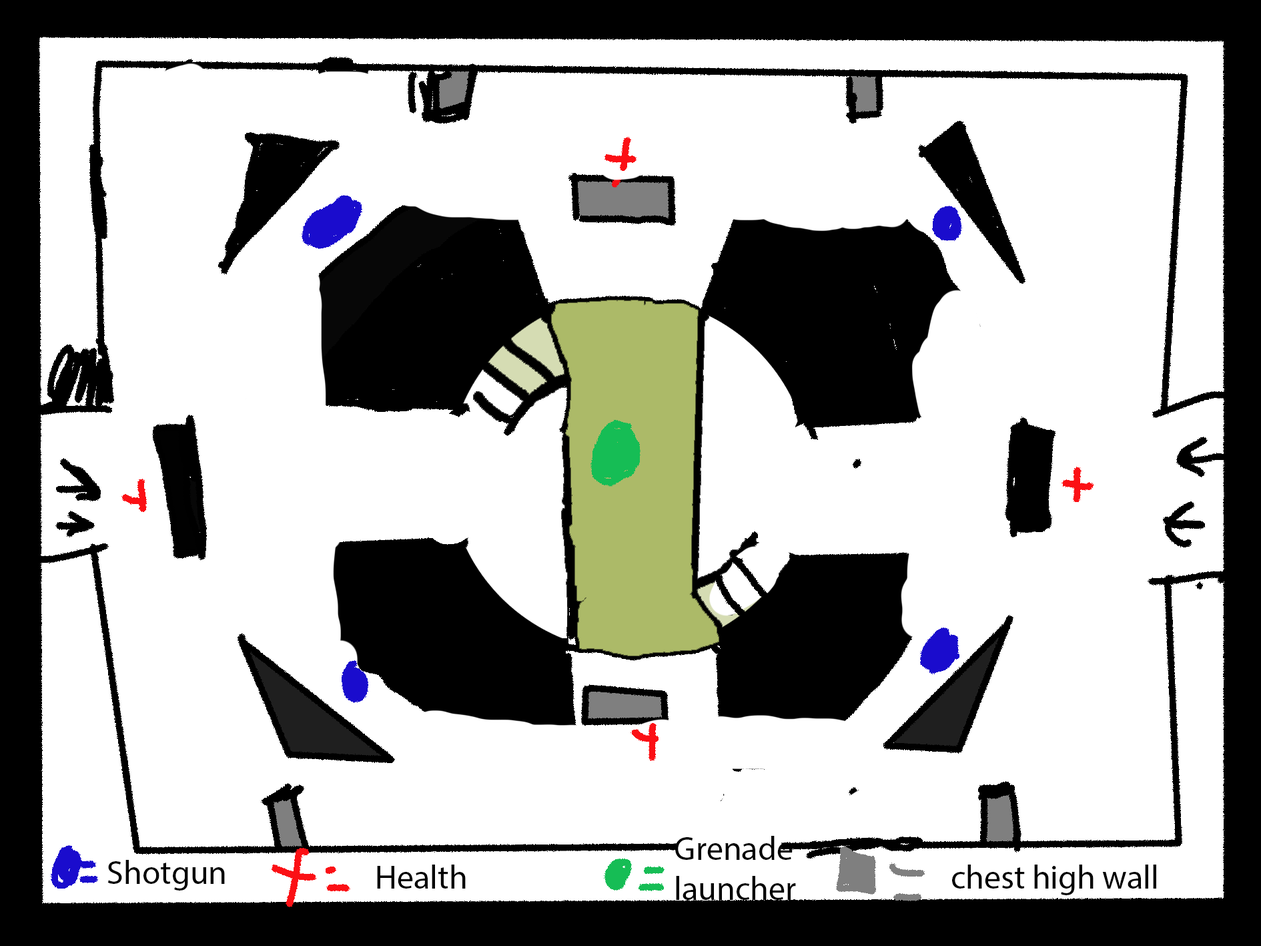
<style>
.page{position:relative;width:1261px;height:946px;background:#ffffff}
.page>*{position:absolute;margin:0}
.t1{font:33.4px "MyriadPro-Regular";color:#000000}
</style>
<div class="page">
<p class="t1" style="left:675px;top:835px;width:121px;height:64px">Grenade <br>launcher</p>
<p class="t1" style="left:107px;top:859px;width:118px;height:31px">Shotgun</p>
<p class="t1" style="left:377px;top:864px;width:89px;height:24px">Health</p>
<p class="t1" style="left:952px;top:864px;width:204px;height:31px">chest high wall</p>
</div>
